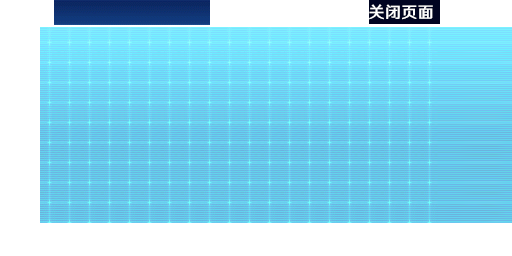
<style>
.page{position:relative;width:512px;height:256px;background:#ffffff}
.page>*{position:absolute;margin:0}
.t1{font:16px "HYWenHei-FEW";letter-spacing:0.025em;color:#fefefe}
</style>
<div class="page">
<p class="t1" style="left:369px;top:4px;width:64px;height:16px">关闭页面</p>
</div>
